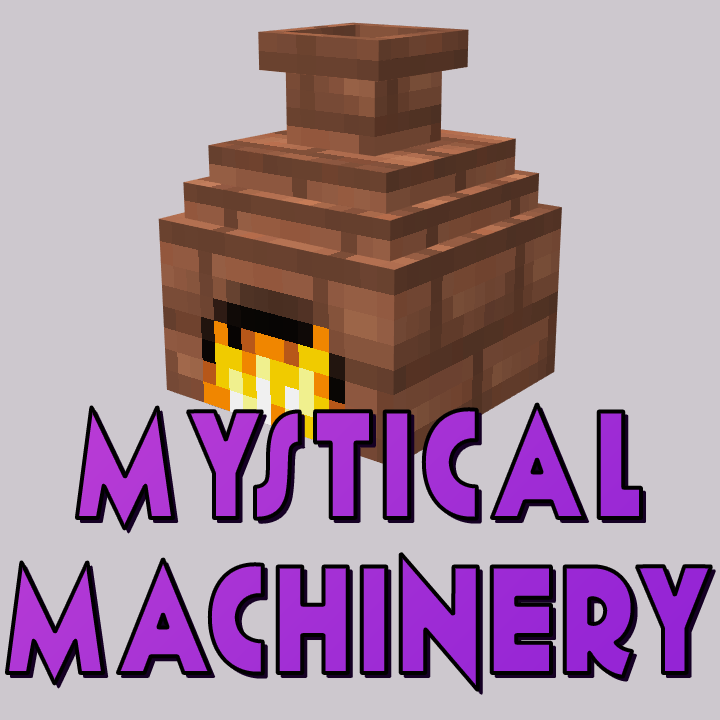
<style>
.page{position:relative;width:720px;height:720px;background:#cdc8ce}
.page>*{position:absolute;margin:0}
.t1{font:151px/51.9px "Geomancy-ExtraBold";letter-spacing:0.05em;color:#a02dd5;scale:0.8 1}
</style>
<div class="page">
<p class="t1" style="left:7px;top:404px;width:704px;height:286px;text-align:center">MYSTICAL<br><br><br>MACHINERY</p>
</div>
